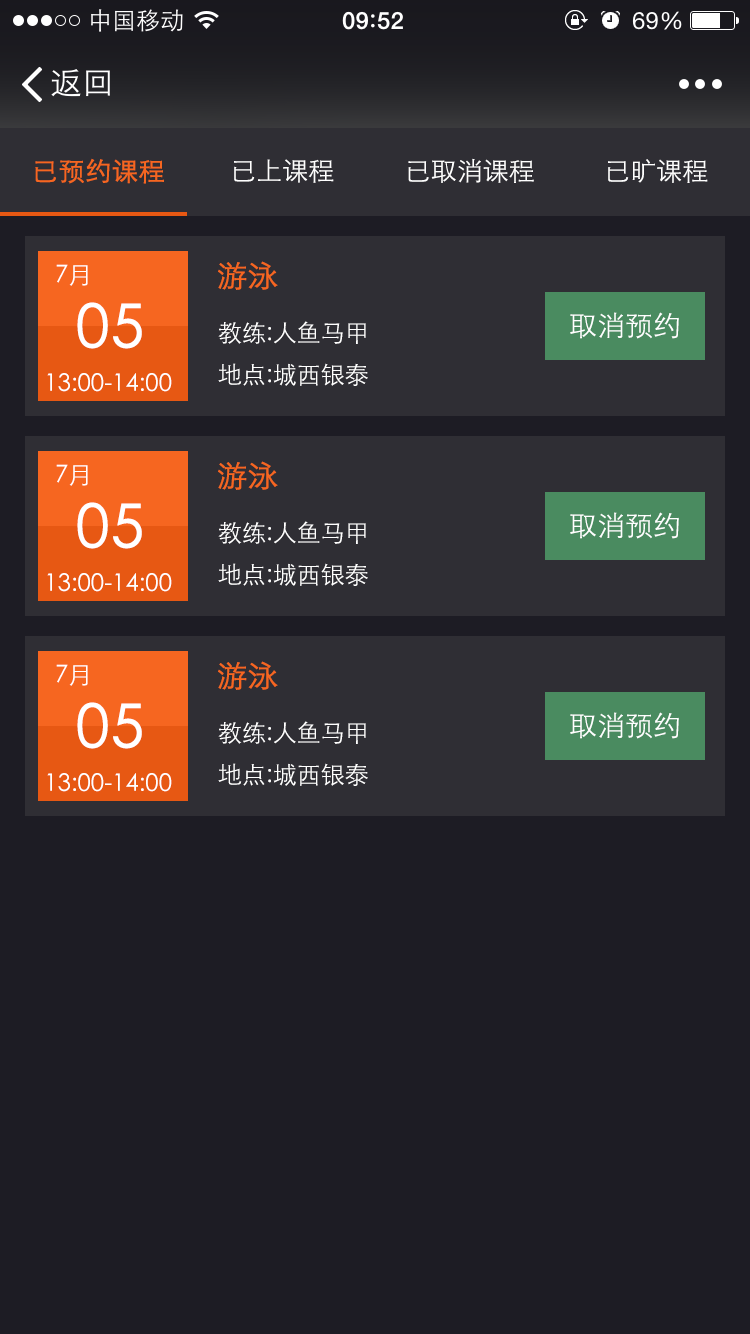
<style>
.page{position:relative;width:750px;height:1334px;background:#1d1c24}
.page>*{position:absolute;margin:0}
.t1{font:26px "STXihei";color:#f66620;font-weight:bold}
.t2{font:26px "STXihei";color:#ffffff}
.t3{font:24px "STXihei";color:#ffffff}
.t4{font:30px "STXihei";color:#f66620;font-weight:bold}
.t5{font:60px "STXihei";color:#ffffff;font-weight:bold}
.t6{font:28px "STXihei";color:#ffffff}
.t7{font:24px/42px "STXihei";color:#ffffff}
</style>
<div class="page">
<p class="t1" style="left:35px;top:158px;width:129px;height:26px">已预约课程</p>
<p class="t2" style="left:234px;top:159px;width:100px;height:24px">已上课程</p>
<p class="t2" style="left:408px;top:158px;width:126px;height:25px">已取消课程</p>
<p class="t2" style="left:608px;top:159px;width:100px;height:24px">已旷课程</p>
<p class="t3" style="left:56px;top:264px;width:32px;height:22px">7月</p>
<p class="t4" style="left:218px;top:261px;width:60px;height:29px">游泳</p>
<p class="t5" style="left:77px;top:302px;width:65px;height:47px">05</p>
<p class="t6" style="left:570px;top:312px;width:109px;height:27px">取消预约</p>
<p class="t7" style="left:218px;top:321px;width:150px;height:65px">教练:人鱼马甲<br>地点:城西银泰</p>
<p class="t3" style="left:47px;top:373px;width:125px;height:19px">13:00-14:00</p>
<p class="t4" style="left:218px;top:461px;width:60px;height:29px">游泳</p>
<p class="t3" style="left:56px;top:464px;width:32px;height:22px">7月</p>
<p class="t5" style="left:77px;top:502px;width:65px;height:47px">05</p>
<p class="t7" style="left:218px;top:521px;width:150px;height:65px">教练:人鱼马甲<br>地点:城西银泰</p>
<p class="t6" style="left:570px;top:512px;width:109px;height:27px">取消预约</p>
<p class="t3" style="left:47px;top:573px;width:125px;height:19px">13:00-14:00</p>
<p class="t3" style="left:56px;top:664px;width:32px;height:22px">7月</p>
<p class="t4" style="left:218px;top:661px;width:60px;height:29px">游泳</p>
<p class="t5" style="left:77px;top:702px;width:65px;height:47px">05</p>
<p class="t6" style="left:570px;top:712px;width:109px;height:27px">取消预约</p>
<p class="t7" style="left:218px;top:721px;width:150px;height:65px">教练:人鱼马甲<br>地点:城西银泰</p>
<p class="t3" style="left:47px;top:773px;width:125px;height:19px">13:00-14:00</p>
</div>
